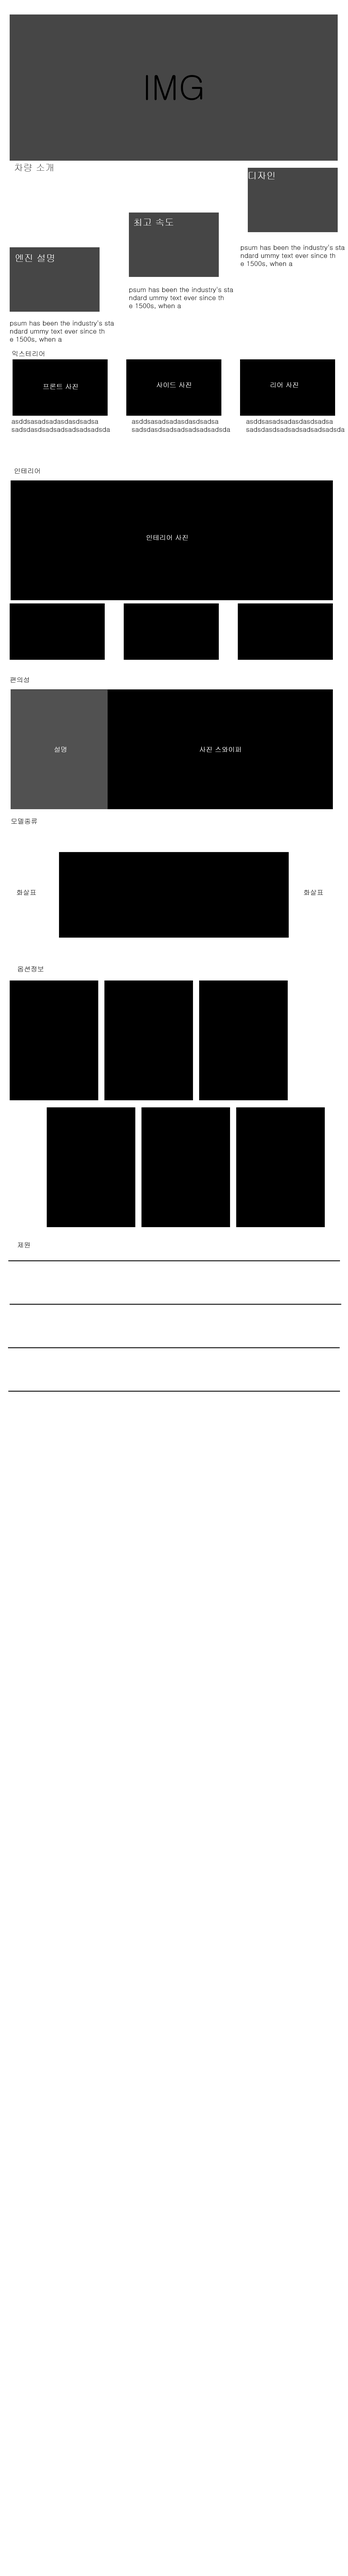
<style>
.page{position:relative;width:348px;height:2576px;background:#ffffff}
.page>*{position:absolute;margin:0}
.t1{font:33.5px "Gulim";color:#000000}
.t2{font:9.4px "Gulim";color:#464646}
.t3{font:9.4px "Gulim";color:#ffffff}
.t4{font:6.7px "Gulim";color:#000000}
.t5{font:6.7px "Gulim";color:#ffffff}
</style>
<div class="page">
<p class="t1" style="left:146px;top:75px;width:56px;height:25px">IMG</p>
<p class="t2" style="left:15px;top:164px;width:38px;height:8px">차량 소개</p>
<p class="t3" style="left:249px;top:172px;width:25px;height:7px">디자인</p>
<p class="t3" style="left:134px;top:219px;width:39px;height:7px">최고 속도</p>
<p class="t4" style="left:241px;top:244px;width:104px;height:23px">psum has been the industry's sta<br>ndard ummy text ever since th<br>e 1500s, when a</p>
<p class="t3" style="left:16px;top:254px;width:38px;height:8px">엔진 설명</p>
<p class="t4" style="left:129px;top:287px;width:104px;height:22px">psum has been the industry's sta<br>ndard ummy text ever since th<br>e 1500s, when a</p>
<p class="t4" style="left:10px;top:320px;width:104px;height:23px">psum has been the industry's sta<br>ndard ummy text ever since th<br>e 1500s, when a</p>
<p class="t4" style="left:12px;top:351px;width:32px;height:5px">익스테리어</p>
<p class="t5" style="left:43px;top:384px;width:35px;height:5px">프론트 사진</p>
<p class="t5" style="left:156px;top:382px;width:35px;height:6px">사이드 사진</p>
<p class="t5" style="left:270px;top:382px;width:28px;height:6px">리어 사진</p>
<p class="t4" style="left:12px;top:419px;width:98px;height:13px">asddsasadsadasdasdsadsa<br>sadsdasdsadsadsadsadsadsda</p>
<p class="t4" style="left:132px;top:419px;width:98px;height:13px">asddsasadsadasdasdsadsa<br>sadsdasdsadsadsadsadsadsda</p>
<p class="t4" style="left:246px;top:419px;width:98px;height:13px">asddsasadsadasdasdsadsa<br>sadsdasdsadsadsadsadsadsda</p>
<p class="t4" style="left:14px;top:468px;width:26px;height:6px">인테리어</p>
<p class="t5" style="left:147px;top:535px;width:40px;height:5px">인테리어 사진</p>
<p class="t4" style="left:10px;top:677px;width:19px;height:6px">편의성</p>
<p class="t5" style="left:54px;top:747px;width:12px;height:5px">설명</p>
<p class="t5" style="left:200px;top:747px;width:41px;height:5px">사진 스와이퍼</p>
<p class="t4" style="left:11px;top:819px;width:26px;height:5px">모델종류</p>
<p class="t4" style="left:17px;top:890px;width:19px;height:5px">화살표</p>
<p class="t4" style="left:304px;top:890px;width:19px;height:5px">화살표</p>
<p class="t4" style="left:18px;top:966px;width:25px;height:6px">옵션정보</p>
<p class="t4" style="left:18px;top:1242px;width:12px;height:6px">제원</p>
</div>
